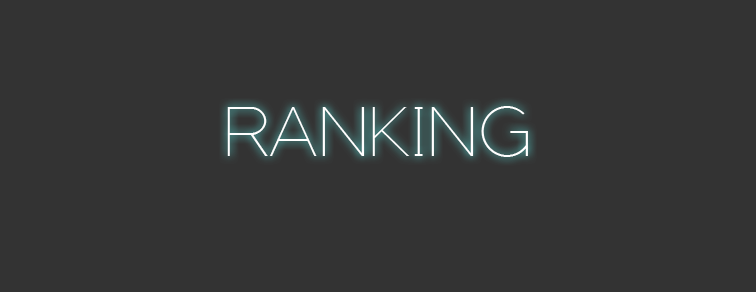
<style>
.page{position:relative;width:756px;height:292px;background:#333333}
.page>*{position:absolute;margin:0}
.t1{font:61px "Adequate-ExtraLight";color:#ffffff}
</style>
<div class="page">
<p class="t1" style="left:227px;top:106px;width:301px;height:51px">RANKING</p>
</div>
